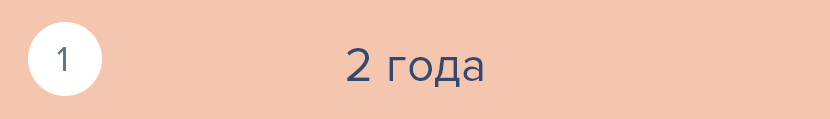
<style>
.page{position:relative;width:830px;height:119px;background:#f4c6b0}
.page>*{position:absolute;margin:0}
.t1{font:36px "ProximaNova-Regular";color:#647493}
.t2{font:48px "ProximaNova-Regular";color:#344870}
</style>
<div class="page">
<p class="t1" style="left:57px;top:47px;width:9px;height:24px">1</p>
<p class="t2" style="left:347px;top:48px;width:136px;height:39px">2 года</p>
</div>
